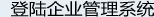
<style>
.page{position:relative;width:154px;height:17px;background:#e7eef4}
.page>*{position:absolute;margin:0}
.t1{font:16.2px "MicrosoftYaHei";color:#000000;scale:1.11 1}
</style>
<div class="page">
<p class="t1" style="left:10px;top:0px;width:145px;height:17px">登陆企业管理系统</p>
</div>
